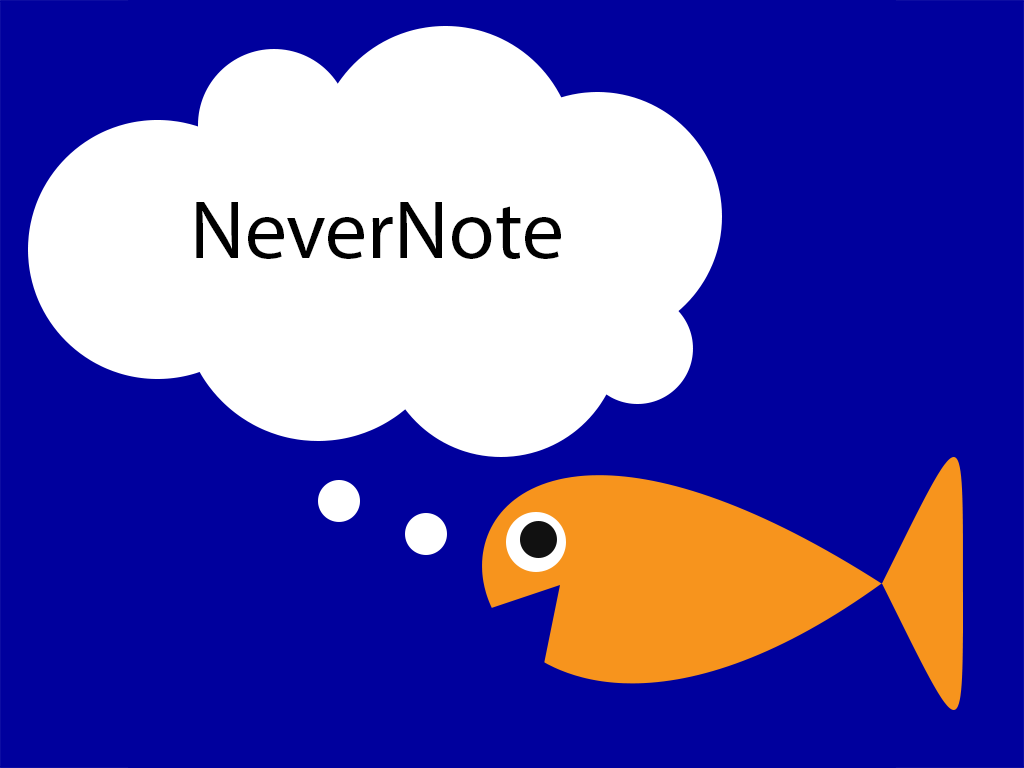
<style>
.page{position:relative;width:1024px;height:768px;background:#00009d}
.page>*{position:absolute;margin:0}
.t1{font:83.1px "MyriadPro-Regular";color:#000000}
</style>
<div class="page">
<p class="t1" style="left:196px;top:202px;width:365px;height:57px">NeverNote</p>
</div>
